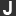
<style>
.page{position:relative;width:16px;height:16px;background:#323232}
.page>*{position:absolute;margin:0}
.t1{font:22px "Arial-BoldMT"}
.t2{font:19px "Arial-BoldMT";color:#ffffff}
</style>
<div class="page">
<p class="t1" style="left:2px;top:0px;width:11px;height:16px">J</p>
<p class="t2" style="left:3px;top:1px;width:9px;height:14px">J</p>
</div>
